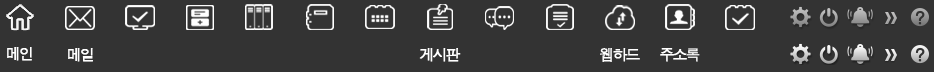
<style>
.page{position:relative;width:934px;height:72px;background:#333333}
.page>*{position:absolute;margin:0}
.t1{font:15px "Dotum";letter-spacing:-0.16em;color:#ffffff;font-weight:bold}
</style>
<div class="page">
<p class="t1" style="left:7px;top:47px;width:25px;height:14px">메인</p>
<p class="t1" style="left:68px;top:48px;width:25px;height:14px">메일</p>
<p class="t1" style="left:419px;top:48px;width:42px;height:14px">게시판</p>
<p class="t1" style="left:600px;top:48px;width:40px;height:14px">웹하드</p>
<p class="t1" style="left:660px;top:48px;width:40px;height:14px">주소록</p>
</div>
